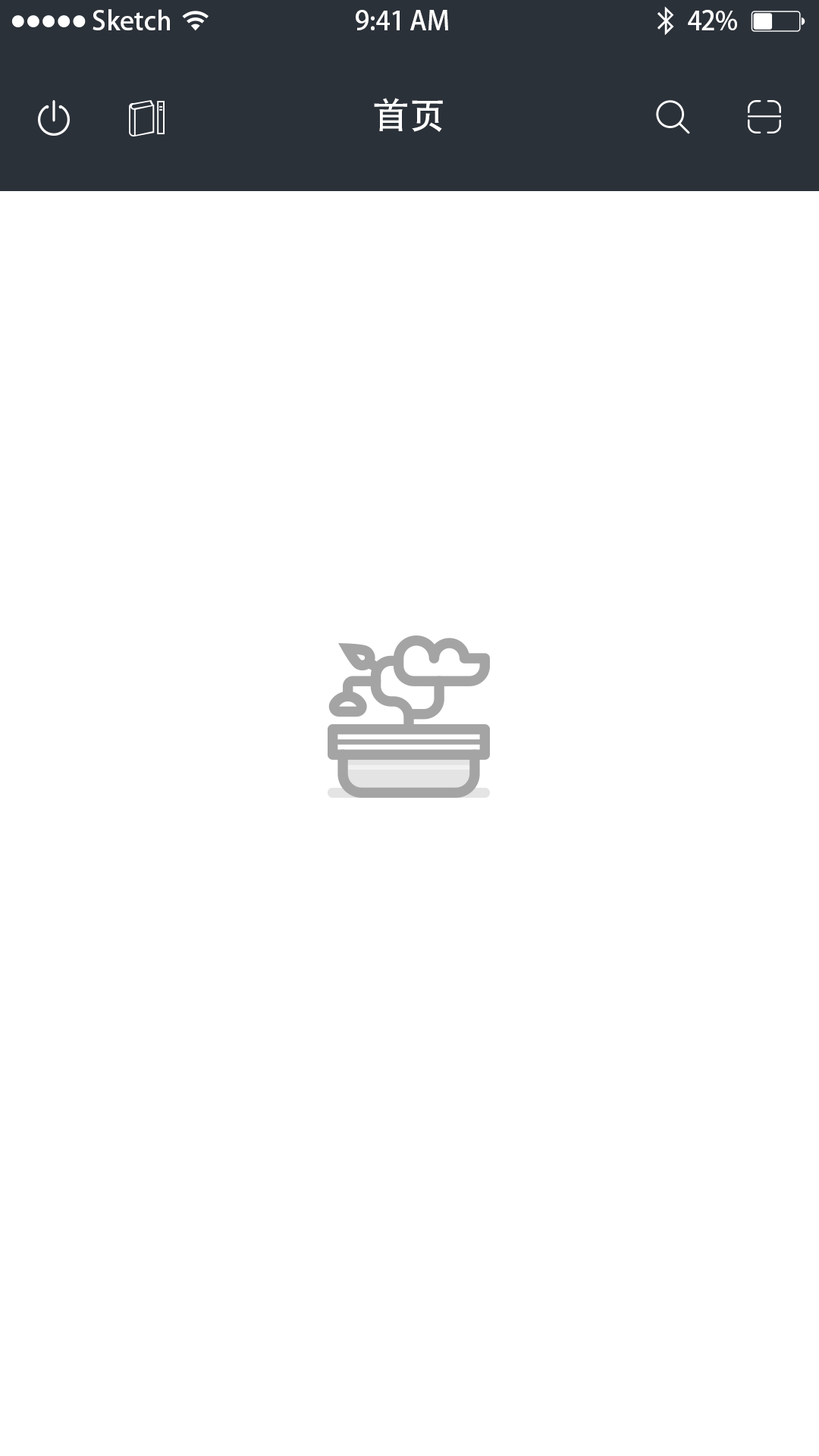
<style>
.page{position:relative;width:819px;height:1456px;background:#ffffff}
.page>*{position:absolute;margin:0}
.t1{font:26.2px "AdobeHeitiStd-Regular";color:#ffffff}
.t2{font:36.4px "AdobeHeitiStd-Regular";color:#ffffff}
</style>
<div class="page">
<p class="t1" style="left:93px;top:9px;width:77px;height:21px">Sketch</p>
<p class="t1" style="left:356px;top:10px;width:92px;height:20px">9:41 AM</p>
<p class="t1" style="left:688px;top:10px;width:49px;height:21px">42%</p>
<p class="t2" style="left:374px;top:98px;width:69px;height:34px">首页</p>
</div>
